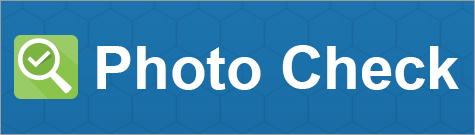
<style>
.page{position:relative;width:475px;height:135px}
.page>*{position:absolute;margin:0}
.t1{font:60px "Arial-BoldMT";color:#ffffff}
</style>
<div class="page">
<p class="t1" style="left:97px;top:45px;width:362px;height:45px">Photo Check</p>
</div>
